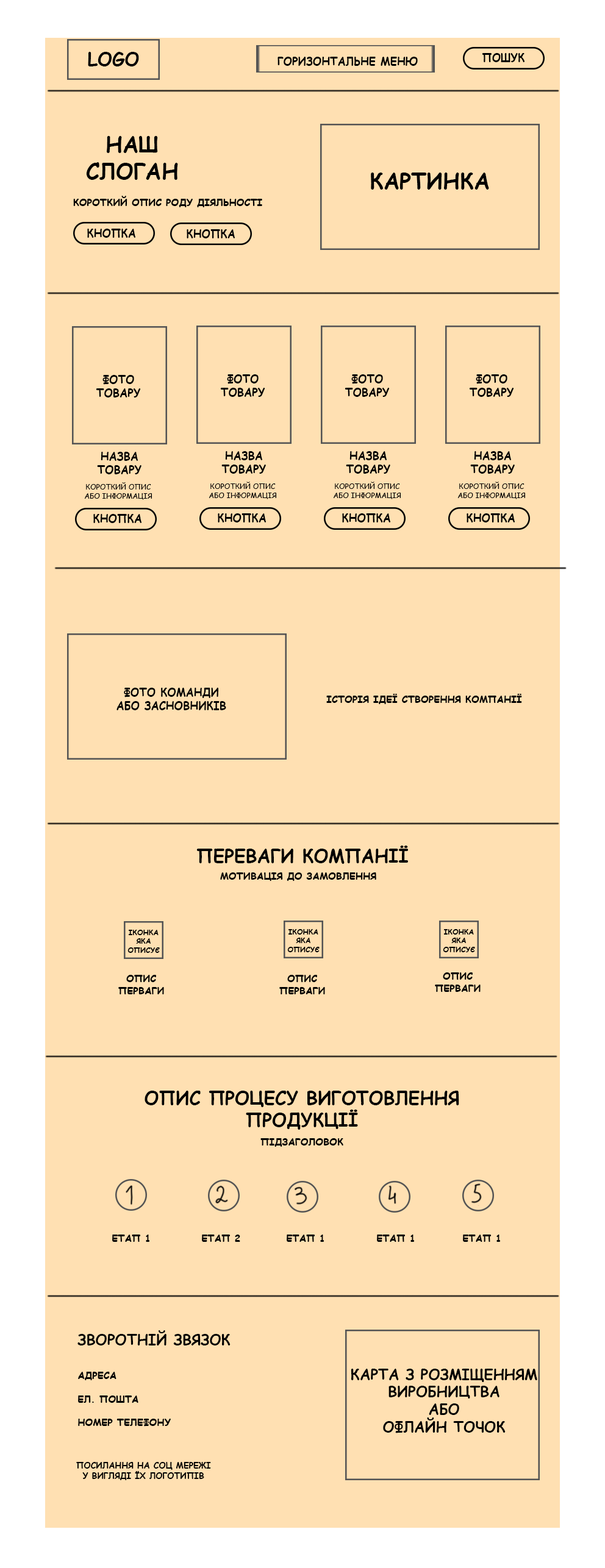
<style>
.page{position:relative;width:605px;height:1568px;background:#ffe0b2}
.page>*{position:absolute;margin:0}
.t1{font:18.3px "ComicSansMS-Bold";color:#000000;text-transform:uppercase}
.t2{font:11px "ComicSansMS-Bold";color:#000000;text-transform:uppercase}
.t3{font:21.9px "ComicSansMS-Bold";color:#000000;text-transform:uppercase}
.t4{font:9.8px "ComicSansMS-Bold";color:#000000;text-transform:uppercase}
.t5{font:7.3px "ComicSansMS";color:#000000;text-transform:uppercase}
.t6{font:7.3px "ComicSansMS-Bold";color:#000000;text-transform:uppercase}
.t7{font:14.6px "ComicSansMS-Bold";color:#000000;text-transform:uppercase}
.t8{font:8.5px "ComicSansMS-Bold";color:#000000;text-transform:uppercase}
</style>
<div class="page">
<p class="t1" style="left:88px;top:52px;width:51px;height:14px">Logo</p>
<p class="t2" style="left:482px;top:53px;width:42px;height:9px">пошук</p>
<p class="t2" style="left:277px;top:57px;width:141px;height:9px">Горизонтальне меню</p>
<p class="t3" style="left:86px;top:136px;width:92px;height:44px;text-align:center">Наш<br>слоган</p>
<p class="t3" style="left:371px;top:173px;width:118px;height:17px">картинка</p>
<p class="t4" style="left:73px;top:196px;width:189px;height:11px">короткий опис роду діяльності</p>
<p class="t2" style="left:87px;top:229px;width:48px;height:9px">кнопка</p>
<p class="t2" style="left:187px;top:229px;width:48px;height:9px">кнопка</p>
<p class="t2" style="left:96px;top:375px;width:45px;height:22px;text-align:center">фото<br>товару</p>
<p class="t2" style="left:220px;top:374px;width:45px;height:23px;text-align:center">фото<br>товару</p>
<p class="t2" style="left:344px;top:374px;width:46px;height:23px;text-align:center">фото<br>товару</p>
<p class="t2" style="left:469px;top:374px;width:45px;height:23px;text-align:center">фото<br>товару</p>
<p class="t2" style="left:97px;top:452px;width:44px;height:22px;text-align:center">Назва<br>товару</p>
<p class="t2" style="left:221px;top:451px;width:45px;height:23px;text-align:center">Назва<br>товару</p>
<p class="t2" style="left:346px;top:451px;width:44px;height:23px;text-align:center">Назва<br>товару</p>
<p class="t2" style="left:470px;top:451px;width:45px;height:23px;text-align:center">Назва<br>товару</p>
<p class="t5" style="left:84px;top:482px;width:68px;height:18px;text-align:center">короткий опис<br>або інформація</p>
<p class="t5" style="left:208px;top:482px;width:68px;height:17px;text-align:center">короткий опис<br>або інформація</p>
<p class="t5" style="left:333px;top:482px;width:68px;height:17px;text-align:center">короткий опис<br>або інформація</p>
<p class="t5" style="left:457px;top:482px;width:68px;height:17px;text-align:center">короткий опис<br>або інформація</p>
<p class="t2" style="left:93px;top:514px;width:48px;height:9px">кнопка</p>
<p class="t2" style="left:218px;top:513px;width:48px;height:9px">кнопка</p>
<p class="t2" style="left:342px;top:513px;width:48px;height:9px">кнопка</p>
<p class="t2" style="left:466px;top:513px;width:49px;height:9px">кнопка</p>
<p class="t2" style="left:116px;top:688px;width:110px;height:22px;text-align:center">фото команди<br>або засновників</p>
<p class="t4" style="left:326px;top:694px;width:196px;height:10px">історія ідеї створення компанії</p>
<p class="t1" style="left:196px;top:846px;width:212px;height:18px">Переваги компанії</p>
<p class="t4" style="left:220px;top:872px;width:156px;height:9px">мотивація до замовлення</p>
<p class="t6" style="left:127px;top:930px;width:33px;height:23px;text-align:center">іконка<br>яка<br>описує</p>
<p class="t6" style="left:287px;top:929px;width:32px;height:23px;text-align:center">іконка<br>яка<br>описує</p>
<p class="t6" style="left:443px;top:929px;width:32px;height:23px;text-align:center">іконка<br>яка<br>описує</p>
<p class="t4" style="left:118px;top:975px;width:46px;height:19px;text-align:center">Опис<br>перваги</p>
<p class="t4" style="left:279px;top:975px;width:46px;height:19px;text-align:center">Опис<br>перваги</p>
<p class="t4" style="left:435px;top:972px;width:45px;height:20px;text-align:center">Опис<br>перваги</p>
<p class="t1" style="left:144px;top:1091px;width:315px;height:39px;text-align:center">опис процесу виготовлення<br>продукції</p>
<p class="t4" style="left:260px;top:1138px;width:83px;height:9px">підзаголовок</p>
<p class="t4" style="left:112px;top:1235px;width:38px;height:7px">Етап 1</p>
<p class="t4" style="left:202px;top:1235px;width:38px;height:7px">Етап 2</p>
<p class="t4" style="left:287px;top:1235px;width:37px;height:7px">Етап 1</p>
<p class="t4" style="left:377px;top:1235px;width:38px;height:7px">Етап 1</p>
<p class="t4" style="left:463px;top:1235px;width:38px;height:7px">Етап 1</p>
<p class="t7" style="left:77px;top:1330px;width:153px;height:15px">Зворотній звязок</p>
<p class="t4" style="left:78px;top:1372px;width:93px;height:55px">адреса<br><br>ел. пошта<br><br>номер телефону</p>
<p class="t7" style="left:351px;top:1369px;width:186px;height:64px;text-align:center">Карта з розміщенням виробництва<br>або<br>офлайн точок</p>
<p class="t8" style="left:76px;top:1462px;width:135px;height:18px;text-align:center">Посилання на соц мережі<br>у вигляді їх логотипів</p>
</div>
